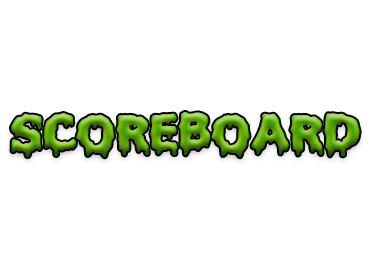
<style>
.page{position:relative;width:370px;height:270px;background:#ffffff}
.page>*{position:absolute;margin:0}
.t1{font:55px "Liquidismpart2"}
</style>
<div class="page">
<p class="t1" style="left:11px;top:112px;width:349px;height:46px">SCOREBOARD</p>
</div>
